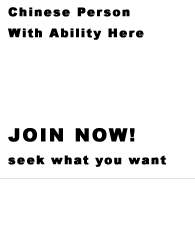
<style>
.page{position:relative;width:195px;height:227px;background:#ffffff}
.page>*{position:absolute;margin:0}
.t1{font:12px "Arial-Black";letter-spacing:0.1em;color:#000000;font-weight:bold}
.t2{font:14px "Arial-Black";letter-spacing:0.1em;color:#ffffff;font-weight:bold}
.t3{font:18px "Arial-Black";letter-spacing:0.1em;color:#000000;font-weight:bold}
</style>
<div class="page">
<p class="t1" style="left:8px;top:7px;width:136px;height:33px">Chinese Person <br>With Ability Here</p>
<p class="t2" style="left:8px;top:103px;width:127px;height:39px">Submit Your<br><span class="t3">JOIN NOW!</span></p>
<p class="t1" style="left:8px;top:155px;width:158px;height:12px">seek what you want</p>
</div>
